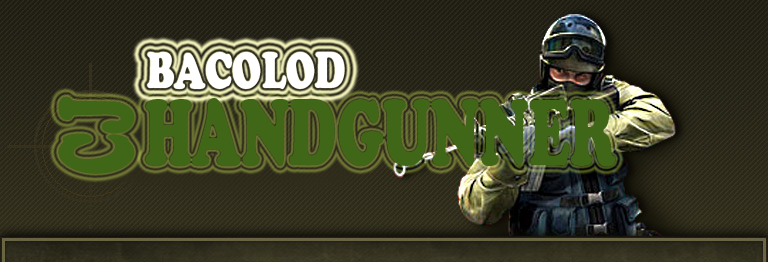
<style>
.page{position:relative;width:768px;height:262px}
.page>*{position:absolute;margin:0}
.t1{font:49.3px "CooperBlackStd";color:#ffffff;scale:0.73 1}
.t2{font:49.3px "RosewoodStd-Regular";color:#ffffff;scale:0.73 1}
.t3{font:104px "CooperBlackStd";color:#406618;scale:0.54 1}
.t4{font:93.4px "CooperBlackStd";color:#406618;scale:0.6 1}
</style>
<div class="page">
<p class="t1" style="left:147px;top:52px;width:198px;height:37px"><span class="t2"> </span>BACOLOD</p>
<p class="t3" style="left:58px;top:96px;width:77px;height:78px;rotate:-90deg">CJ</p>
<p class="t4" style="left:145px;top:98px;width:471px;height:69px">HANDGUNNER</p>
</div>
